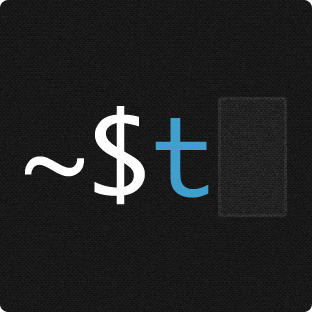
<style>
.page{position:relative;width:312px;height:312px}
.page>*{position:absolute;margin:0}
.t1{font:108.1px "Monaco";color:#ffffff}
.t2{font:108.1px "Monaco";color:#409fcb}
</style>
<div class="page">
<p class="t1" style="left:24px;top:106px;width:185px;height:99px">~$<span class="t2">t</span></p>
</div>
